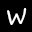
<style>
.page{position:relative;width:32px;height:32px;background:#000000}
.page>*{position:absolute;margin:0}
.t1{font:20px "SegoeScript-Bold";color:#ffffff}
</style>
<div class="page">
<p class="t1" style="left:7px;top:8px;width:20px;height:17px">W</p>
</div>
